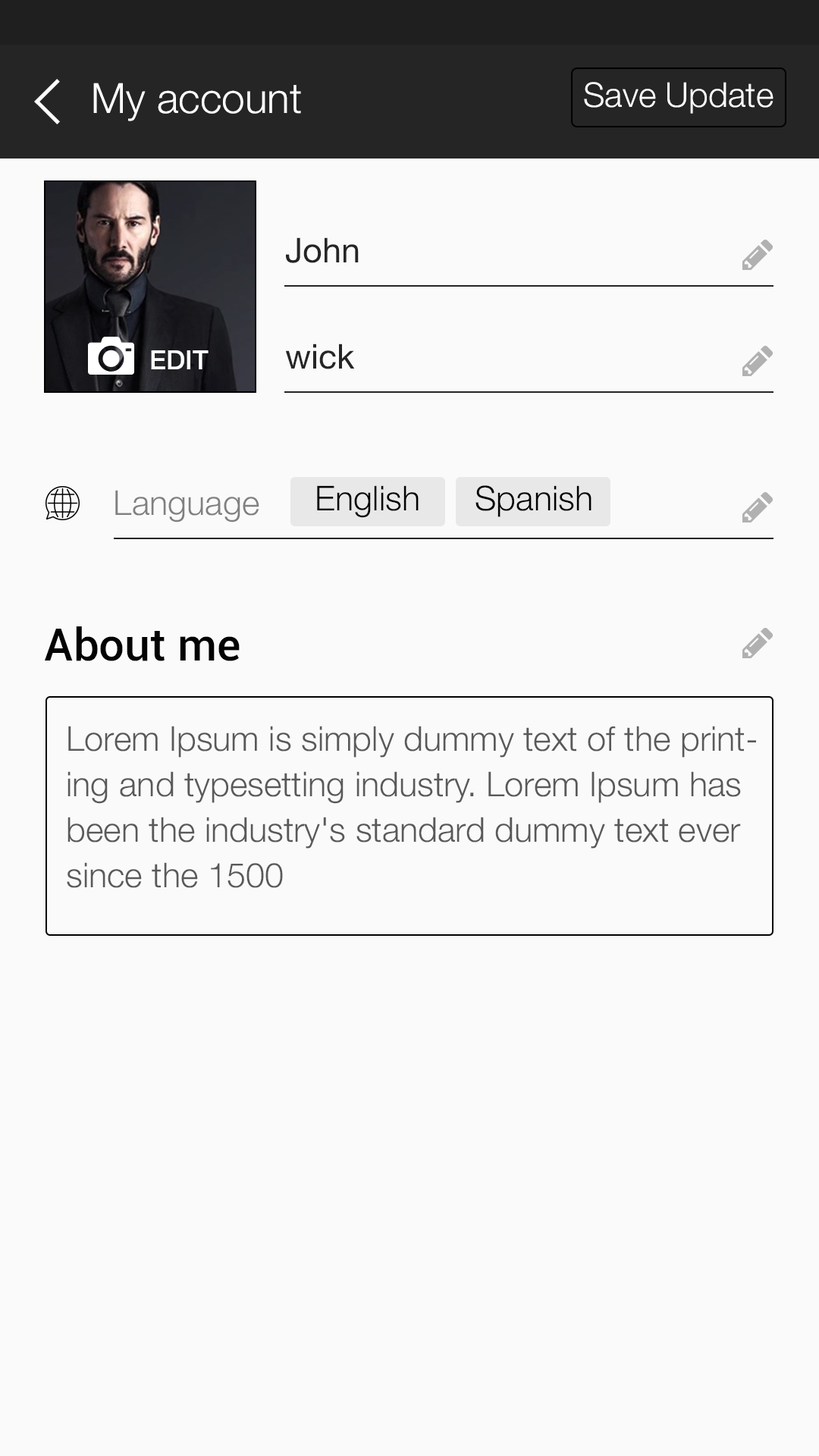
<style>
.page{position:relative;width:819px;height:1456px;background:#fafafa}
.page>*{position:absolute;margin:0}
.t1{font:41.7px "HelveticaNeue-Light";color:#ffffff}
.t2{font:34.1px "HelveticaNeue-Light";color:#ffffff}
.t3{font:34.1px "HelveticaNeue";color:#252525}
.t4{font:26.5px "HelveticaNeue-Medium";color:#ffffff}
.t5{font:34.1px "HelveticaNeue-Light";color:#000000}
.t6{font:34.1px "HelveticaNeue-Light";color:#808080}
.t7{font:45.5px "Roboto-Medium";color:#030303}
.t8{font:34.1px/45.5px "HelveticaNeue-Light";color:#595959}
</style>
<div class="page">
<p class="t1" style="left:93px;top:83px;width:208px;height:38px">My account</p>
<p class="t2" style="left:584px;top:82px;width:189px;height:32px">Save Update</p>
<p class="t3" style="left:286px;top:237px;width:73px;height:26px">John</p>
<p class="t4" style="left:151px;top:350px;width:58px;height:19px">EDIT</p>
<p class="t3" style="left:285px;top:344px;width:70px;height:25px">wick</p>
<p class="t5" style="left:317px;top:485px;width:102px;height:33px">English</p>
<p class="t5" style="left:475px;top:485px;width:116px;height:32px">Spanish</p>
<p class="t6" style="left:115px;top:490px;width:144px;height:32px">Language</p>
<p class="t7" style="left:45px;top:626px;width:195px;height:35px">About me</p>
<p class="t8" style="left:67px;top:726px;width:689px;height:162px">Lorem Ipsum is simply dummy text of the printing and typesetting industry. Lorem Ipsum has been the industry's standard dummy text ever since the 1500</p>
</div>
